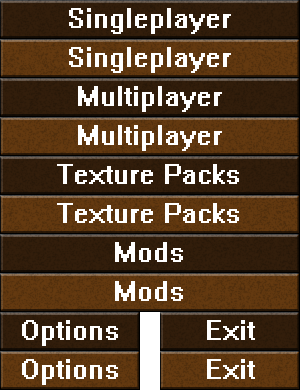
<style>
.page{position:relative;width:300px;height:390px}
.page>*{position:absolute;margin:0}
.t1{font:28px "System";color:#ffffff}
</style>
<div class="page">
<p class="t1" style="left:69px;top:8px;width:162px;height:26px">Singleplayer</p>
<p class="t1" style="left:69px;top:47px;width:162px;height:26px">Singleplayer</p>
<p class="t1" style="left:78px;top:86px;width:144px;height:26px">Multiplayer</p>
<p class="t1" style="left:78px;top:125px;width:144px;height:26px">Multiplayer</p>
<p class="t1" style="left:57px;top:164px;width:182px;height:20px">Texture Packs</p>
<p class="t1" style="left:57px;top:203px;width:182px;height:20px">Texture Packs</p>
<p class="t1" style="left:115px;top:242px;width:68px;height:20px">Mods</p>
<p class="t1" style="left:115px;top:281px;width:68px;height:20px">Mods</p>
<p class="t1" style="left:22px;top:320px;width:96px;height:26px">Options</p>
<p class="t1" style="left:207px;top:320px;width:48px;height:20px">Exit</p>
<p class="t1" style="left:22px;top:359px;width:96px;height:26px">Options</p>
<p class="t1" style="left:207px;top:359px;width:48px;height:20px">Exit</p>
</div>
